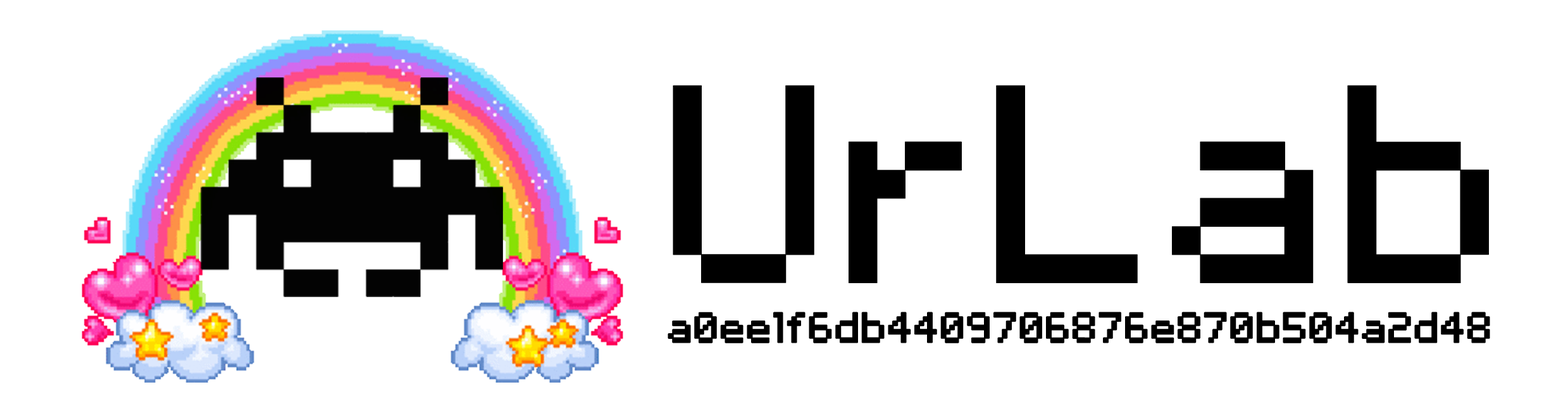
<style>
.page{position:relative;width:1568px;height:413px;background:#ffffff}
.page>*{position:absolute;margin:0}
.t1{font:253.3px "VolterGoldfish";color:#000000;font-weight:bold}
.t2{font:38px "VolterGoldfish";color:#000000;font-weight:bold}
</style>
<div class="page">
<p class="t1" style="left:673px;top:85px;width:816px;height:198px">UrLab</p>
<p class="t2" style="left:668px;top:311px;width:822px;height:32px">a0ee1f6db4409706876e870b504a2d48</p>
</div>
